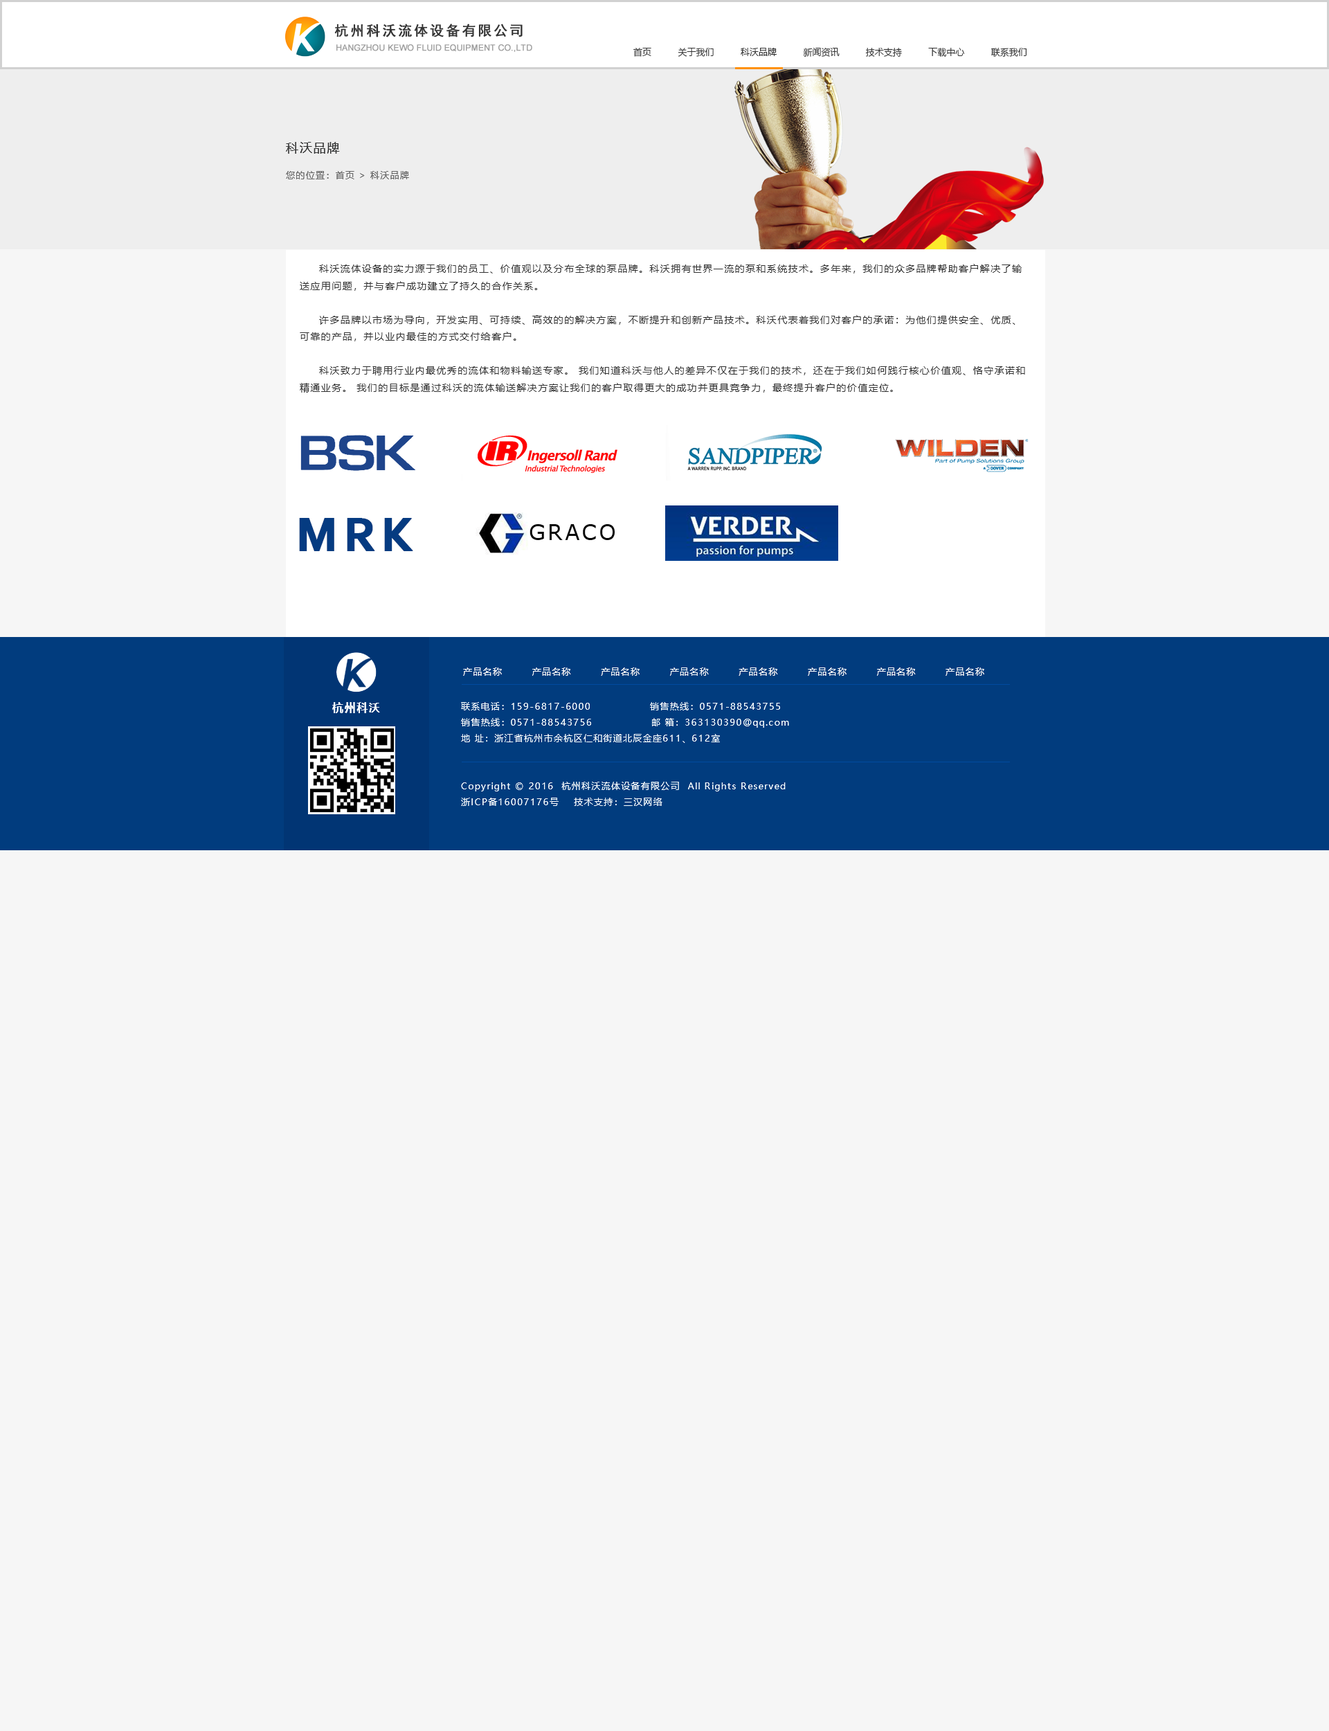
<style>
.page{position:relative;width:1329px;height:1731px;background:#f6f6f6}
.page>*{position:absolute;margin:0}
.t1{font:13.8px "SimHei";letter-spacing:0.1em;color:#333333;font-weight:bold}
.t2{font:8.3px "ArialMT";color:#9f9f9f;font-weight:bold}
.t3{font:9px "MicrosoftYaHei";color:#333333}
.t4{font:12.5px "MicrosoftYaHei";letter-spacing:0.1em;color:#323333}
.t5{font:9px "MicrosoftYaHei";letter-spacing:0.1em;color:#666666}
.t6{font:9.7px "MicrosoftYaHei";letter-spacing:0.1em;color:#333333}
.t7{font:9px "MicrosoftYaHei";letter-spacing:0.1em;color:#ffffff}
.t8{font:11.1px "MicrosoftYaHei-Bold";letter-spacing:0.1em;color:#ffffff}
</style>
<div class="page">
<p class="t1" style="left:334px;top:24px;width:189px;height:13px">杭州科沃流体设备有限公司</p>
<p class="t2" style="left:336px;top:44px;width:196px;height:8px">HANGZHOU KEWO FLUID EQUIPMENT CO.,LTD</p>
<p class="t3" style="left:633px;top:47px;width:394px;height:10px">首页          关于我们          科沃品牌          新闻资讯          技术支持          下载中心          联系我们</p>
<p class="t4" style="left:286px;top:142px;width:54px;height:12px">科沃品牌</p>
<p class="t5" style="left:286px;top:171px;width:123px;height:8px">您的位置：首页 &gt; 科沃品牌</p>
<p class="t6" style="left:300px;top:264px;width:725px;height:129px">科沃流体设备的实力源于我们的员工、价值观以及分布全球的泵品牌。科沃拥有世界一流的泵和系统技术。多年来，我们的众多品牌帮助客户解决了输送应用问题，并与客户成功建立了持久的合作关系。<br><br>许多品牌以市场为导向，开发实用、可持续、高效的的解决方案，不断提升和创新产品技术。科沃代表着我们对客户的承诺：为他们提供安全、优质、可靠的产品，并以业内最佳的方式交付给客户。<br><br>科沃致力于聘用行业内最优秀的流体和物料输送专家。 我们知道科沃与他人的差异不仅在于我们的技术，还在于我们如何践行核心价值观、恪守承诺和精通业务。 我们的目标是通过科沃的流体输送解决方案让我们的客户取得更大的成功并更具竞争力，最终提升客户的价值定位。</p>
<p class="t7" style="left:463px;top:667px;width:521px;height:9px">产品名称        产品名称        产品名称        产品名称        产品名称        产品名称        产品名称        产品名称</p>
<p class="t8" style="left:332px;top:702px;width:48px;height:11px">杭州科沃</p>
<p class="t7" style="left:461px;top:702px;width:328px;height:41px">联系电话：159-6817-6000                销售热线：0571-88543755<br>销售热线：0571-88543756                邮 箱：363130390@qq.com<br>地 址：浙江省杭州市余杭区仁和街道北辰金座611、612室</p>
<p class="t7" style="left:461px;top:782px;width:325px;height:24px">Copyright © 2016  杭州科沃流体设备有限公司  All Rights Reserved    <br>浙ICP备16007176号    技术支持：三汉网络</p>
</div>
